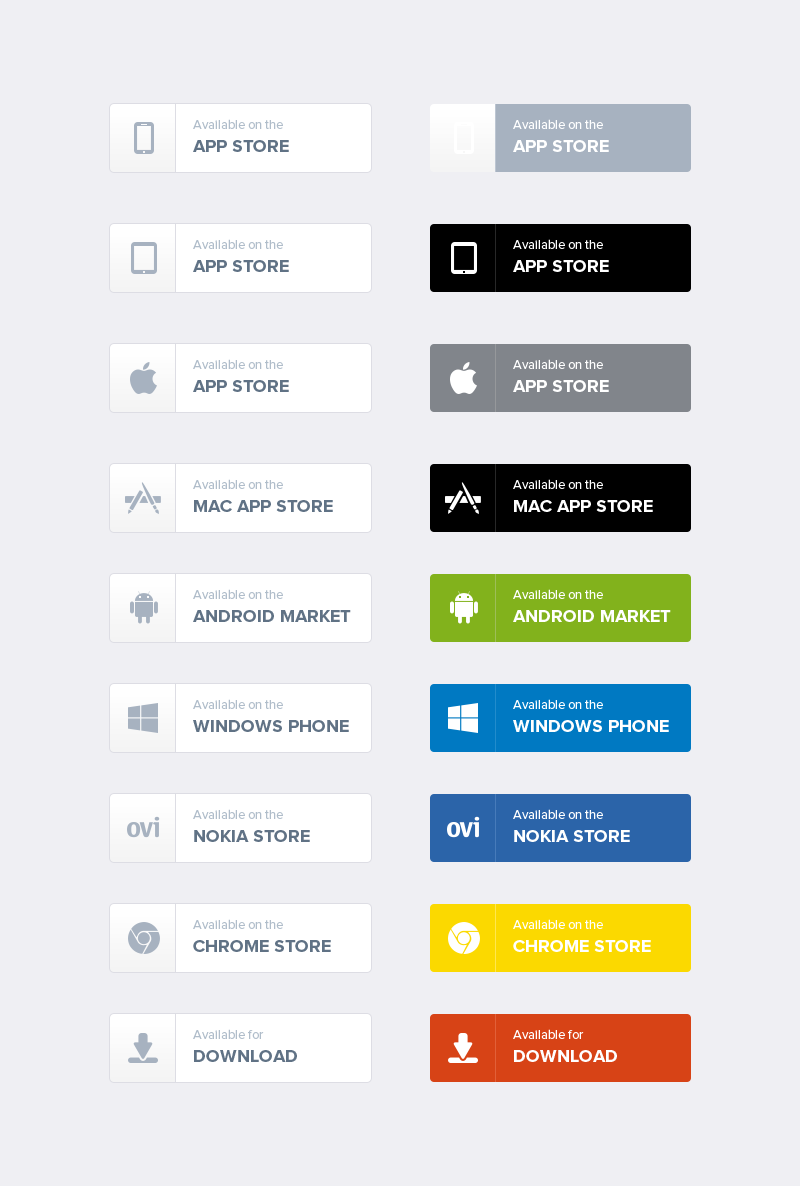
<style>
.page{position:relative;width:800px;height:1186px;background:#efeff3}
.page>*{position:absolute;margin:0}
.t1{font:13px "ProximaNova-Regular";color:#b0bdca}
.t2{font:13px "ProximaNova-Regular";color:#ffffff}
.t3{font:18px "ProximaNova-Bold";color:#607285;text-transform:uppercase}
.t4{font:18px "ProximaNova-Bold";color:#ffffff;text-transform:uppercase}
</style>
<div class="page">
<p class="t1" style="left:193px;top:119px;width:90px;height:10px">Available on the</p>
<p class="t2" style="left:513px;top:119px;width:90px;height:10px">Available on the</p>
<p class="t3" style="left:193px;top:140px;width:96px;height:12px">App Store</p>
<p class="t4" style="left:513px;top:140px;width:96px;height:12px">App Store</p>
<p class="t1" style="left:193px;top:239px;width:90px;height:10px">Available on the</p>
<p class="t2" style="left:513px;top:239px;width:90px;height:10px">Available on the</p>
<p class="t3" style="left:193px;top:260px;width:96px;height:12px">App Store</p>
<p class="t4" style="left:513px;top:260px;width:96px;height:12px">App Store</p>
<p class="t1" style="left:193px;top:359px;width:90px;height:10px">Available on the</p>
<p class="t2" style="left:513px;top:359px;width:90px;height:10px">Available on the</p>
<p class="t3" style="left:193px;top:380px;width:96px;height:12px">App Store</p>
<p class="t4" style="left:513px;top:380px;width:96px;height:12px">App Store</p>
<p class="t1" style="left:193px;top:479px;width:90px;height:10px">Available on the</p>
<p class="t2" style="left:513px;top:479px;width:90px;height:10px">Available on the</p>
<p class="t3" style="left:194px;top:500px;width:139px;height:12px">mac app Store</p>
<p class="t4" style="left:514px;top:500px;width:139px;height:12px">mac app Store</p>
<p class="t1" style="left:193px;top:589px;width:90px;height:10px">Available on the</p>
<p class="t2" style="left:513px;top:589px;width:90px;height:10px">Available on the</p>
<p class="t3" style="left:193px;top:610px;width:158px;height:12px">Android Market</p>
<p class="t4" style="left:513px;top:610px;width:158px;height:12px">Android Market</p>
<p class="t1" style="left:193px;top:699px;width:90px;height:10px">Available on the</p>
<p class="t2" style="left:513px;top:699px;width:90px;height:10px">Available on the</p>
<p class="t3" style="left:193px;top:720px;width:156px;height:12px">windows phone</p>
<p class="t4" style="left:513px;top:720px;width:156px;height:12px">windows phone</p>
<p class="t1" style="left:193px;top:809px;width:90px;height:10px">Available on the</p>
<p class="t2" style="left:513px;top:809px;width:90px;height:10px">Available on the</p>
<p class="t3" style="left:194px;top:830px;width:116px;height:12px">nokia store</p>
<p class="t4" style="left:514px;top:830px;width:116px;height:12px">nokia store</p>
<p class="t1" style="left:193px;top:919px;width:90px;height:10px">Available on the</p>
<p class="t2" style="left:513px;top:919px;width:90px;height:10px">Available on the</p>
<p class="t3" style="left:193px;top:940px;width:138px;height:12px">chrome store</p>
<p class="t4" style="left:513px;top:940px;width:138px;height:12px">chrome store</p>
<p class="t1" style="left:193px;top:1029px;width:71px;height:10px">Available for</p>
<p class="t2" style="left:513px;top:1029px;width:71px;height:10px">Available for</p>
<p class="t3" style="left:194px;top:1050px;width:103px;height:12px">download</p>
<p class="t4" style="left:514px;top:1050px;width:103px;height:12px">download</p>
</div>
